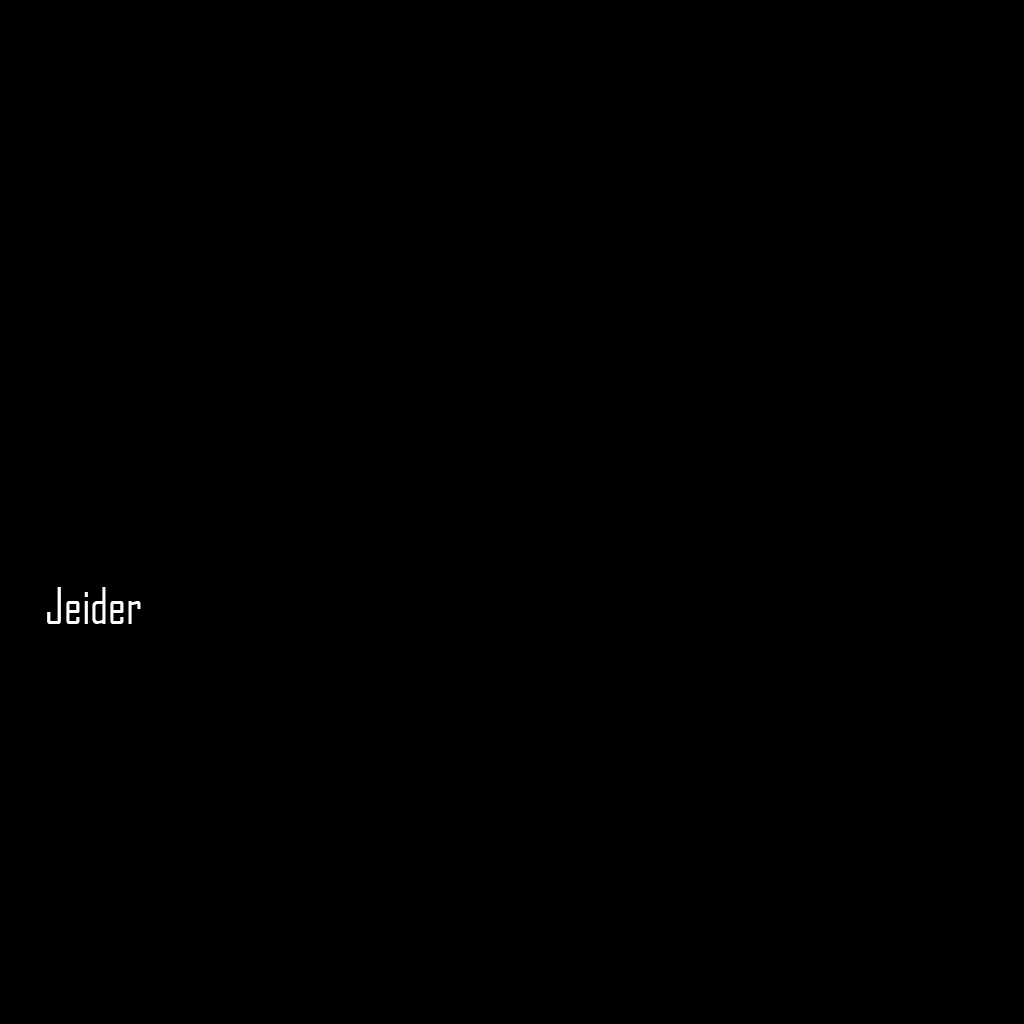
<style>
.page{position:relative;width:1024px;height:1024px;background:#000000}
.page>*{position:absolute;margin:0}
.t1{font:48px "AgencyFBCyrillic";color:#ffffff}
</style>
<div class="page">
<p class="t1" style="left:47px;top:587px;width:94px;height:37px">Jeider</p>
</div>
